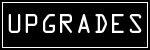
<style>
.page{position:relative;width:150px;height:50px;background:#000000}
.page>*{position:absolute;margin:0}
.t1{font:24px "OCRAStd";color:#ffffff}
</style>
<div class="page">
<p class="t1" style="left:8px;top:14px;width:134px;height:19px">UPGRADES</p>
</div>
